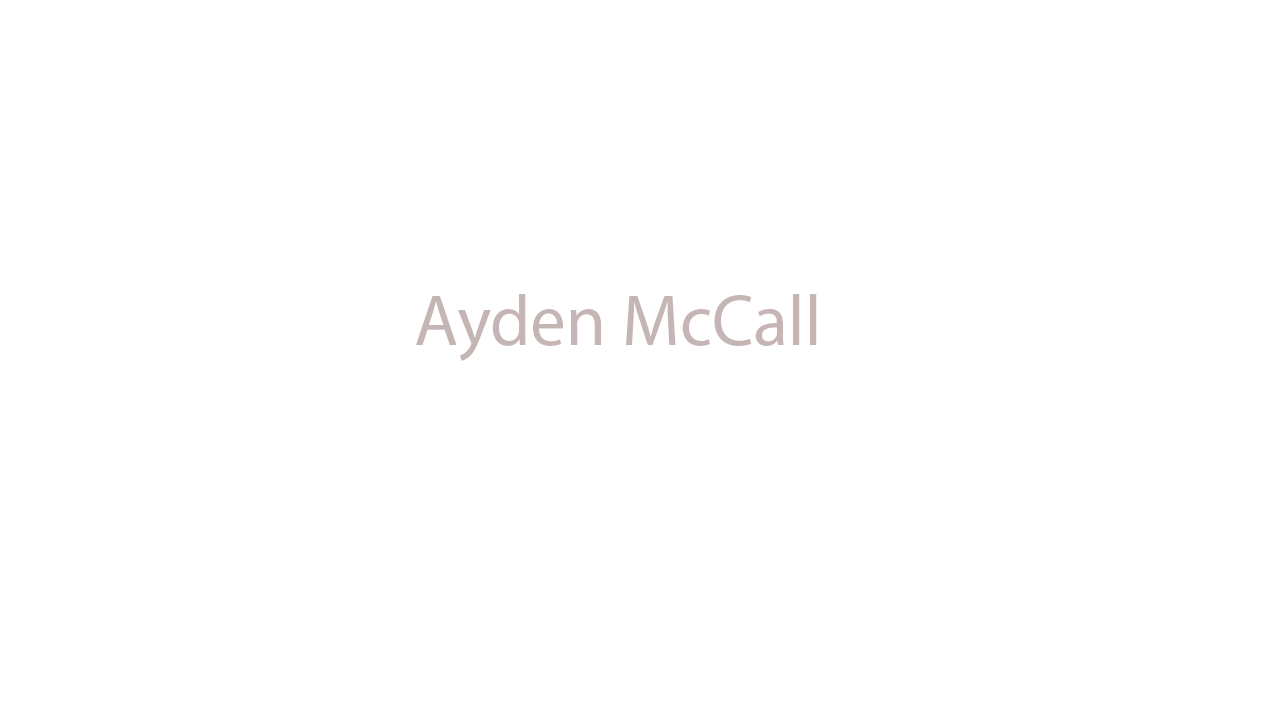
<style>
.page{position:relative;width:1280px;height:720px;background:#ffffff}
.page>*{position:absolute;margin:0}
.t1{font:72px "MyriadPro-Regular";color:#c5b5b5}
</style>
<div class="page">
<p class="t1" style="left:416px;top:294px;width:401px;height:67px">Ayden McCall</p>
</div>
